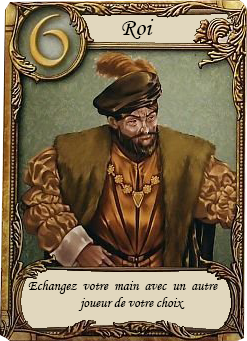
<style>
.page{position:relative;width:247px;height:341px}
.page>*{position:absolute;margin:0}
.t1{font:25px "MonotypeCorsiva";color:#000000}
.t2{font:14px "MonotypeCorsiva";color:#000000}
</style>
<div class="page">
<p class="t1" style="left:122px;top:19px;width:32px;height:20px">Roi</p>
<p class="t2" style="left:28px;top:280px;width:190px;height:31px">Echangez  votre  main  avec  un  autre <br>joueur de votre choix</p>
</div>
